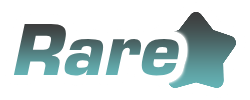
<style>
.page{position:relative;width:250px;height:100px;background:#ffffff}
.page>*{position:absolute;margin:0}
.t1{font:68px "Eurostile-BoldOblique"}
</style>
<div class="page">
<p class="t1" style="left:13px;top:23px;width:166px;height:53px">Rare</p>
</div>
